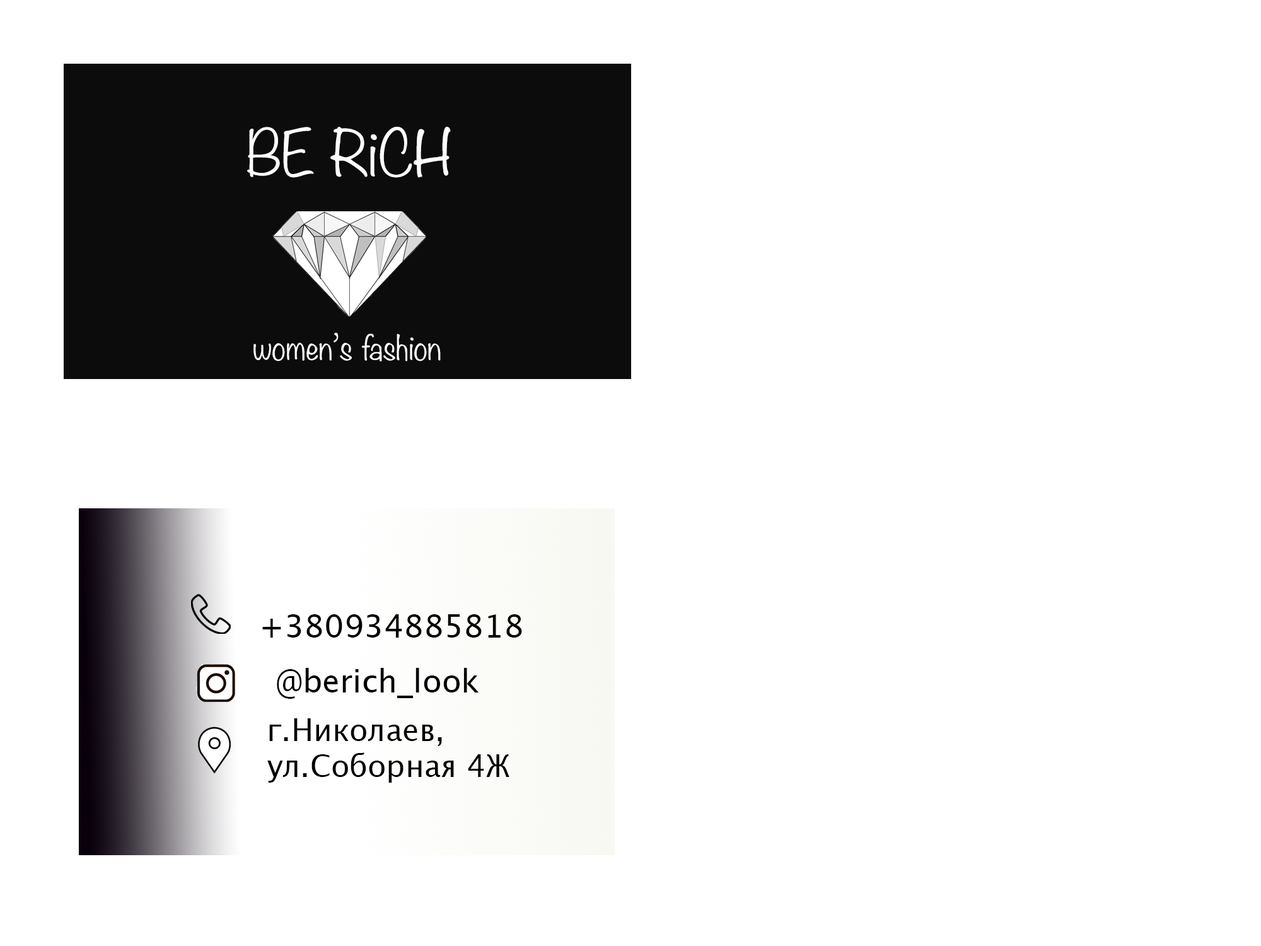
<style>
.page{position:relative;width:1261px;height:946px;background:#ffffff}
.page>*{position:absolute;margin:0}
.t1{font:56.7px "Noteworthy-Light";color:#fffdfd}
.t2{font:30.3px "Noteworthy-Light";color:#fffdfd}
.t3{font:31.5px "LucidaGrande";color:#000000}
.t4{font:30.3px "LucidaGrande";color:#000000}
</style>
<div class="page">
<p class="t1" style="left:247px;top:127px;width:204px;height:51px">BE RiCH</p>
<p class="t2" style="left:253px;top:332px;width:188px;height:29px">women’s fashion</p>
<p class="t3" style="left:262px;top:614px;width:260px;height:23px">+380934885818</p>
<p class="t3" style="left:277px;top:668px;width:202px;height:31px">@berich_look</p>
<p class="t4" style="left:267px;top:718px;width:242px;height:64px">г.Николаев, <br>ул.Соборная 4Ж</p>
</div>
